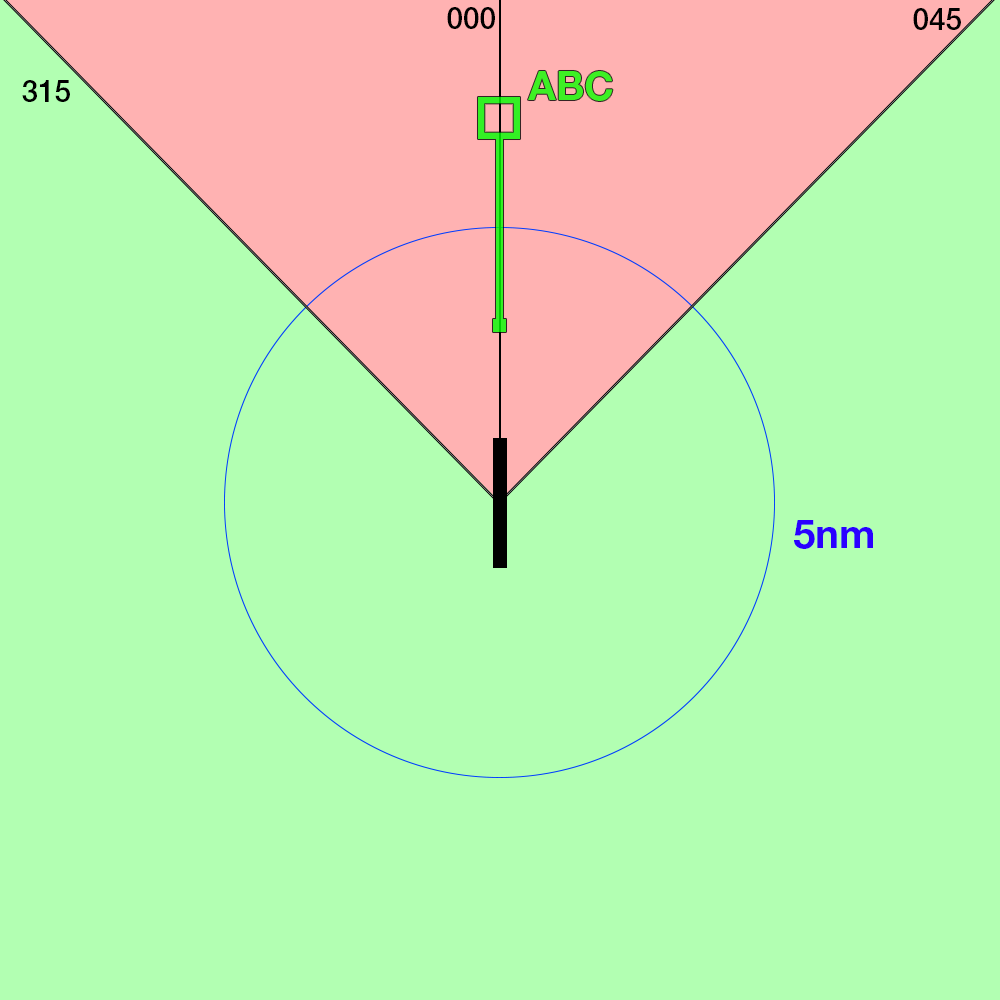
<style>
.page{position:relative;width:1000px;height:1000px;background:#b2ffb2}
.page>*{position:absolute;margin:0}
.t1{font:29.7px "HelveticaNeueLTStd-Md";color:#000000}
.t2{font:40px "HelveticaNeueLTStd-Bd";color:#3df024}
.t3{font:40px "HelveticaNeueLTStd-Bd";color:#2a00ff}
</style>
<div class="page">
<p class="t1" style="left:447px;top:7px;width:48px;height:22px">000</p>
<p class="t1" style="left:913px;top:8px;width:48px;height:22px">045</p>
<p class="t2" style="left:528px;top:71px;width:85px;height:30px">ABC</p>
<p class="t1" style="left:22px;top:80px;width:48px;height:22px">315</p>
<p class="t3" style="left:794px;top:520px;width:79px;height:29px">5nm</p>
</div>
